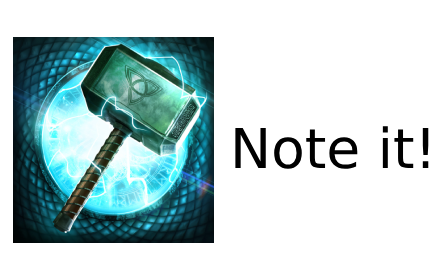
<style>
.page{position:relative;width:440px;height:280px;background:#ffffff}
.page>*{position:absolute;margin:0}
.t1{font:55px "DejaVuSans";color:#000000}
</style>
<div class="page">
<p class="t1" style="left:235px;top:126px;width:194px;height:43px">Note it!</p>
</div>
